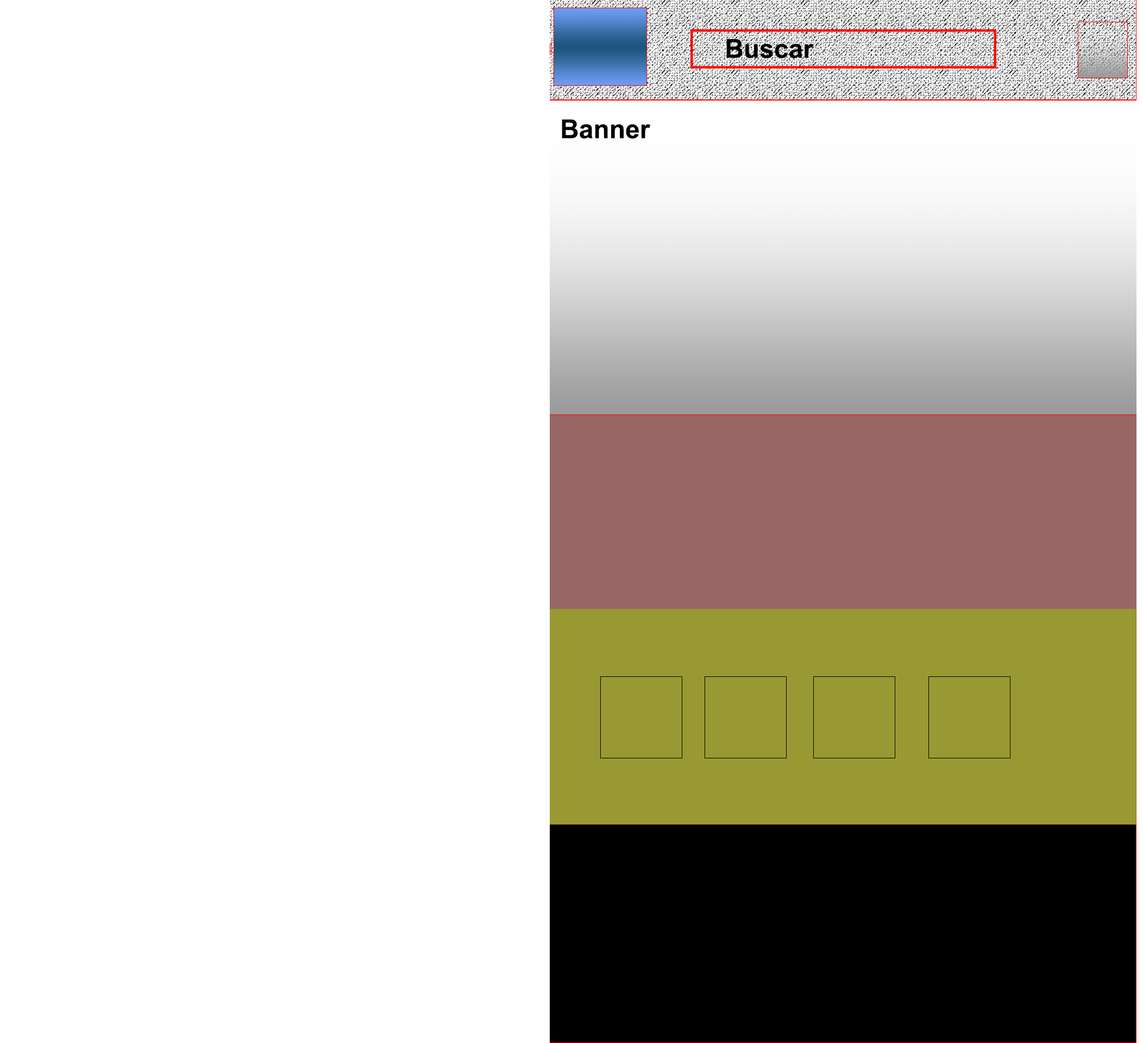
<style>
.page{position:relative;width:1143px;height:1043px;background:#ffffff}
.page>*{position:absolute;margin:0}
.t1{font:26.1px "Arial-BoldMT";color:#000000}
</style>
<div class="page">
<p class="t1" style="left:726px;top:39px;width:88px;height:19px">Buscar</p>
<p class="t1" style="left:562px;top:120px;width:88px;height:19px">Banner</p>
</div>
